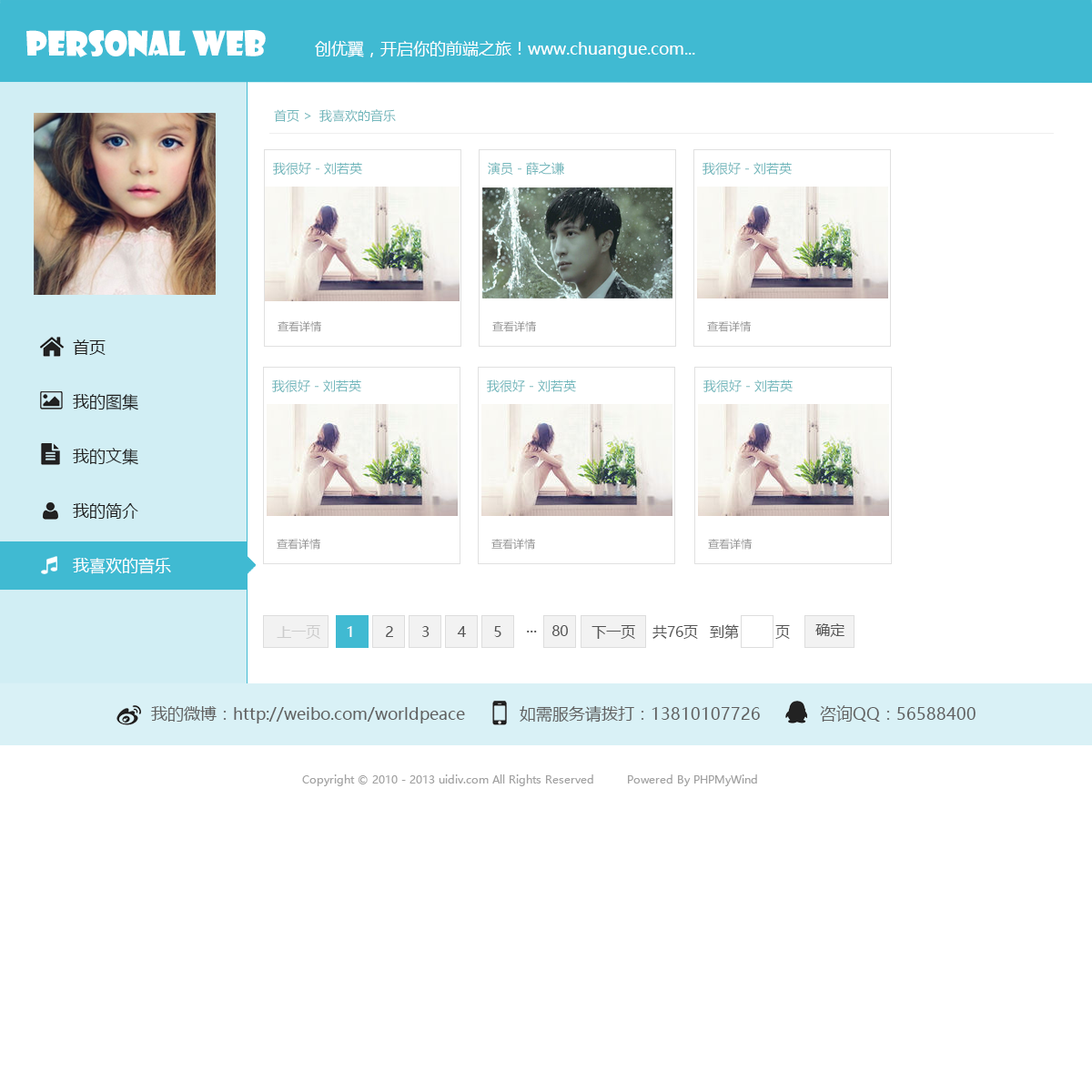
<style>
.page{position:relative;width:1092px;height:1092px;background:#ffffff}
.page>*{position:absolute;margin:0}
.t1{font:32.8px "ShowcardGothic";color:#ffffff}
.t2{font:16.4px "MicrosoftYaHei";color:#ffffff}
.t3{font:12.7px "MicrosoftYaHei";color:#72b7bc}
.t4{font:10.9px "MicrosoftYaHei";color:#939393}
.t5{font:16.4px/27.3px "MicrosoftYaHei";color:#1e1e1e}
.t6{font:16.4px/27.3px "MicrosoftYaHei";color:#232323}
.t7{font:16.4px/27.3px "MicrosoftYaHei";color:#ffffff}
.t8{font:14.6px "MicrosoftYaHei";color:#cccccc}
.t9{font:14.6px "MicrosoftYaHei";color:#ffffff}
.t10{font:14.6px "MicrosoftYaHei";letter-spacing:1.92em;color:#555555}
.t11{font:14.6px "MicrosoftYaHei";color:#555555}
.t12{font:16.4px "MicrosoftYaHei";color:#555555}
.t13{font:16.4px "MicrosoftYaHei";color:#616161}
.t14{font:10.9px "MicrosoftYaHei";color:#a2a2a2}
</style>
<div class="page">
<p class="t1" style="left:26px;top:30px;width:240px;height:27px">personal web</p>
<p class="t2" style="left:315px;top:41px;width:380px;height:17px">创优翼，开启你的前端之旅！www.chuangue.com...</p>
<p class="t3" style="left:274px;top:109px;width:122px;height:13px">首页 &gt;  我喜欢的音乐</p>
<p class="t3" style="left:273px;top:162px;width:89px;height:13px">我很好 - 刘若英</p>
<p class="t3" style="left:488px;top:162px;width:76px;height:13px">演员 - 薛之谦</p>
<p class="t3" style="left:703px;top:162px;width:89px;height:13px">我很好 - 刘若英</p>
<p class="t4" style="left:278px;top:321px;width:43px;height:11px">查看详情</p>
<p class="t4" style="left:492px;top:321px;width:44px;height:11px">查看详情</p>
<p class="t4" style="left:707px;top:321px;width:44px;height:11px">查看详情</p>
<p class="t5" style="left:73px;top:339px;width:98px;height:235px">首页<br><br>我的图集<br><br><span class="t6">我的文集<br></span><br>我的简介<br><br><span class="t7">我喜欢的音乐</span></p>
<p class="t3" style="left:272px;top:379px;width:89px;height:13px">我很好 - 刘若英</p>
<p class="t3" style="left:487px;top:379px;width:89px;height:13px">我很好 - 刘若英</p>
<p class="t3" style="left:703px;top:379px;width:90px;height:13px">我很好 - 刘若英</p>
<p class="t4" style="left:277px;top:539px;width:43px;height:11px">查看详情</p>
<p class="t4" style="left:491px;top:539px;width:44px;height:11px">查看详情</p>
<p class="t4" style="left:708px;top:539px;width:44px;height:11px">查看详情</p>
<p class="t8" style="left:277px;top:625px;width:43px;height:14px">上一页</p>
<p class="t9" style="left:347px;top:626px;width:5px;height:11px">1</p>
<p class="t10" style="left:386px;top:626px;width:115px;height:11px">2345</p>
<p class="t11" style="left:551px;top:625px;width:17px;height:11px">80</p>
<p class="t11" style="left:591px;top:625px;width:44px;height:14px">下一页</p>
<p class="t11" style="left:652px;top:625px;width:46px;height:14px">共76页</p>
<p class="t11" style="left:710px;top:624px;width:80px;height:16px">到第        页</p>
<p class="t11" style="left:815px;top:623px;width:29px;height:14px">确定</p>
<p class="t12" style="left:527px;top:631px;width:10px;height:1px">...</p>
<p class="t13" style="left:151px;top:705px;width:825px;height:18px">我的微博：http://weibo.com/worldpeace            如需服务请拨打：13810107726             咨询QQ：56588400</p>
<p class="t14" style="left:302px;top:774px;width:455px;height:12px">Copyright © 2010 - 2013 uidiv.com All Rights Reserved         Powered By PHPMyWind</p>
</div>
